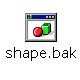
<style>
.page{position:relative;width:80px;height:80px;background:#ffffff}
.page>*{position:absolute;margin:0}
.t1{font:14px "MSReferenceSansSerif";color:#000000}
</style>
<div class="page">
<p class="t1" style="left:6px;top:47px;width:70px;height:14px">shape.bak</p>
</div>
